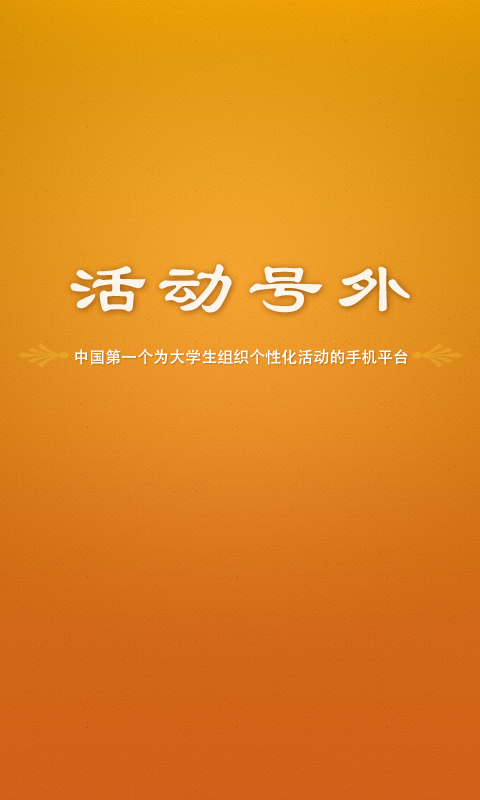
<style>
.page{position:relative;width:480px;height:800px}
.page>*{position:absolute;margin:0}
.t1{font:80.9px "HYf1gj";letter-spacing:-0.3em;color:#ffffff}
.t2{font:16px "AdobeHeitiStd-Regular";color:#ffffff}
</style>
<div class="page">
<p class="t1" style="left:70px;top:264px;width:340px;height:49px">活  动  号  外</p>
<p class="t2" style="left:75px;top:349px;width:333px;height:16px">中国第一个为大学生组织个性化活动的手机平台</p>
</div>
